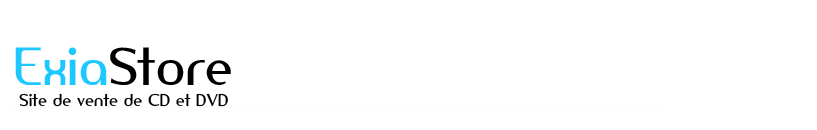
<style>
.page{position:relative;width:817px;height:130px;background:#ffffff}
.page>*{position:absolute;margin:0}
.t1{font:50px "AmerikaSans";color:#000000}
.t2{font:50px "AmerikaSans";color:#1dc7ff}
.t3{font:16px "AmerikaSans";color:#000000}
</style>
<div class="page">
<p class="t1" style="left:15px;top:47px;width:216px;height:38px"><span class="t2">Exia</span>Store</p>
<p class="t3" style="left:19px;top:93px;width:209px;height:14px">Site de vente de CD et DVD</p>
</div>
